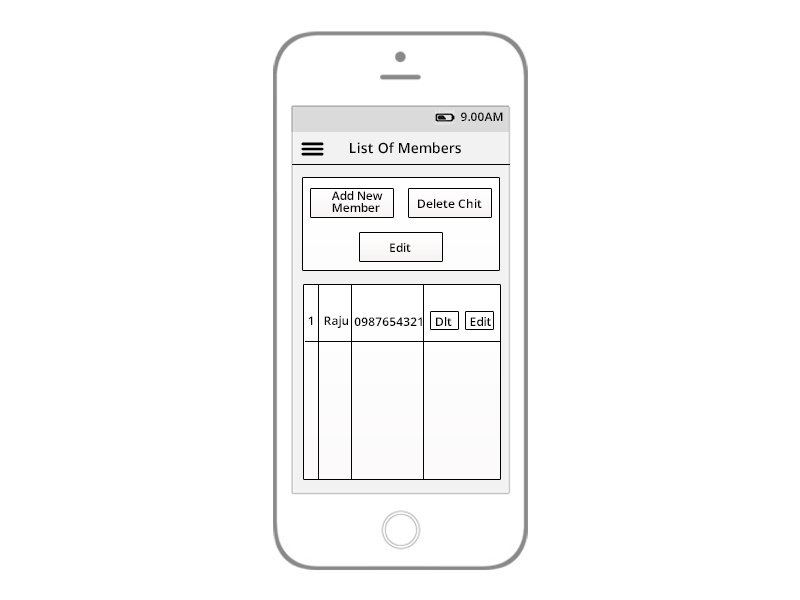
<style>
.page{position:relative;width:800px;height:600px;background:#ffffff}
.page>*{position:absolute;margin:0}
.t1{font:12px "OpenSans-Semibold";color:#030303}
.t2{font:14px "OpenSans-Semibold";color:#030303}
.t3{font:12px/6px "OpenSans-Semibold";color:#030303}
</style>
<div class="page">
<p class="t1" style="left:461px;top:112px;width:42px;height:9px">9.00AM</p>
<p class="t2" style="left:350px;top:142px;width:111px;height:12px">List Of Members</p>
<p class="t3" style="left:331px;top:191px;width:52px;height:21px">Add New <br><br>Member</p>
<p class="t1" style="left:418px;top:199px;width:64px;height:9px">Delete Chit</p>
<p class="t1" style="left:390px;top:243px;width:21px;height:9px">Edit</p>
<p class="t1" style="left:308px;top:316px;width:5px;height:9px">1</p>
<p class="t1" style="left:324px;top:316px;width:24px;height:12px">Raju</p>
<p class="t1" style="left:354px;top:317px;width:68px;height:9px">0987654321</p>
<p class="t1" style="left:436px;top:317px;width:16px;height:9px">Dlt</p>
<p class="t1" style="left:470px;top:317px;width:21px;height:9px">Edit</p>
</div>
